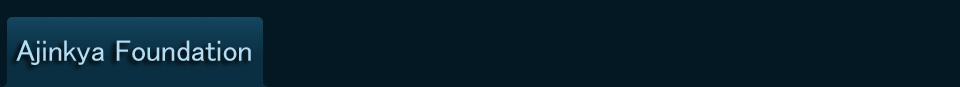
<style>
.page{position:relative;width:960px;height:87px;background:#041823}
.page>*{position:absolute;margin:0}
.t1{font:30px "MS-PGothic";color:#b5dcf1}
</style>
<div class="page">
<p class="t1" style="left:16px;top:40px;width:235px;height:25px">Ajinkya Foundation</p>
</div>
